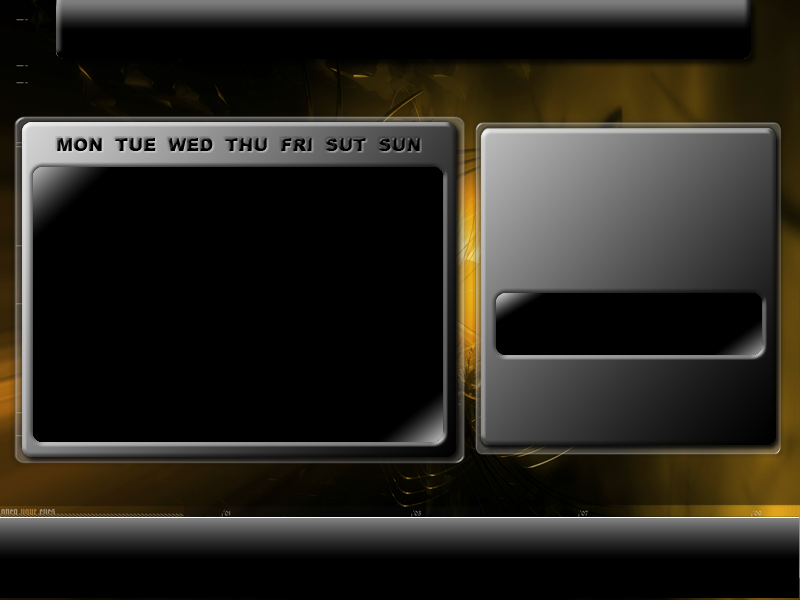
<style>
.page{position:relative;width:800px;height:600px;background:#000000}
.page>*{position:absolute;margin:0}
.t1{font:18px "Arial-Black";color:#000000}
</style>
<div class="page">
<p class="t1" style="left:57px;top:138px;width:363px;height:13px">MON  TUE  WED  THU  FRI  SUT  SUN</p>
</div>
